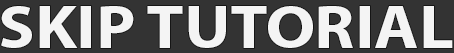
<style>
.page{position:relative;width:454px;height:53px;background:#333333}
.page>*{position:absolute;margin:0}
.t1{font:61px "MyriadHebrew-Bold";color:#f4f4f4;scale:1.12 1}
</style>
<div class="page">
<p class="t1" style="left:1px;top:6px;width:452px;height:42px">SKIP TUTORIAL</p>
</div>
